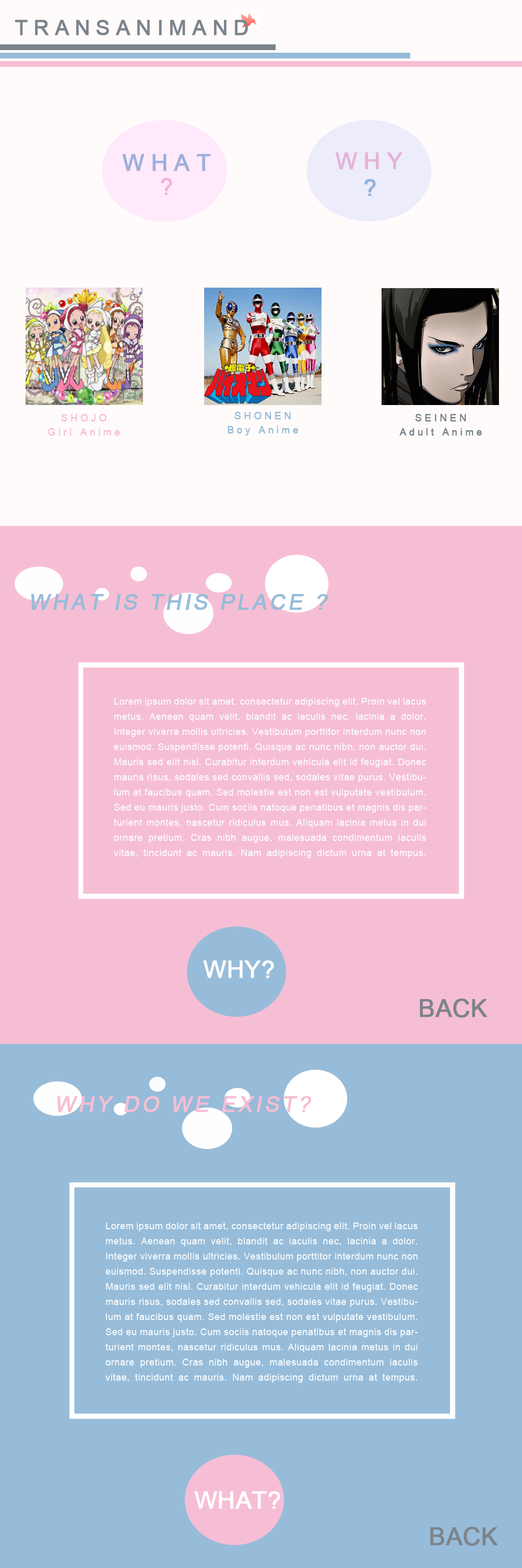
<style>
.page{position:relative;width:522px;height:1568px;background:#97bcd9}
.page>*{position:absolute;margin:0}
.t1{font:9.9px/14.4px "ArialMT";letter-spacing:0.264em;color:#f6bed4;font-weight:bold}
.t2{font:9.9px/14.4px "ArialMT";letter-spacing:0.264em;color:#97bcd9;font-weight:bold}
.t3{font:9.9px/14.4px "ArialMT";letter-spacing:0.264em;color:#7c848b;font-weight:bold}
.t4{font:9.3px/15.1px "ArialMT";letter-spacing:0.04em;color:#fafdff}
.t5{font:24.5px "ArialMT";color:#7c848b;font-weight:bold}
</style>
<div class="page">
<p class="t1" style="left:48px;top:414px;width:72px;height:22px;text-align:center">SHOJO<br>Girl Anime</p>
<p class="t2" style="left:228px;top:412px;width:70px;height:24px;text-align:center">SHONEN<br>Boy Anime</p>
<p class="t3" style="left:399px;top:414px;width:83px;height:22px;text-align:center">SEINEN<br>Adult Anime</p>
<p class="t4" style="left:114px;top:698px;width:312px;height:160px;text-align:justify">Lorem ipsum dolor sit amet, consectetur adipiscing elit. Proin vel lacus metus. Aenean quam velit, blandit ac iaculis nec, lacinia a dolor. Integer viverra mollis ultricies. Vestibulum porttitor interdum nunc non euismod. Suspendisse potenti. Quisque ac nunc nibh, non auctor dui. Mauris sed elit nisl. Curabitur interdum vehicula elit id feugiat. Donec mauris risus, sodales sed convallis sed, sodales vitae purus. Vestibulum at faucibus quam. Sed molestie est non est vulputate vestibulum. Sed eu mauris justo. Cum sociis natoque penatibus et magnis dis parturient montes, nascetur ridiculus mus. Aliquam lacinia metus in dui ornare pretium. Cras nibh augue, malesuada condimentum iaculis vitae, tincidunt ac mauris. Nam adipiscing dictum urna at tempus.</p>
<p class="t5" style="left:420px;top:999px;width:68px;height:19px">BACK</p>
<p class="t4" style="left:105px;top:1222px;width:313px;height:161px;text-align:justify">Lorem ipsum dolor sit amet, consectetur adipiscing elit. Proin vel lacus metus. Aenean quam velit, blandit ac iaculis nec, lacinia a dolor. Integer viverra mollis ultricies. Vestibulum porttitor interdum nunc non euismod. Suspendisse potenti. Quisque ac nunc nibh, non auctor dui. Mauris sed elit nisl. Curabitur interdum vehicula elit id feugiat. Donec mauris risus, sodales sed convallis sed, sodales vitae purus. Vestibulum at faucibus quam. Sed molestie est non est vulputate vestibulum. Sed eu mauris justo. Cum sociis natoque penatibus et magnis dis parturient montes, nascetur ridiculus mus. Aliquam lacinia metus in dui ornare pretium. Cras nibh augue, malesuada condimentum iaculis vitae, tincidunt ac mauris. Nam adipiscing dictum urna at tempus.</p>
<p class="t5" style="left:430px;top:1527px;width:68px;height:19px">BACK</p>
</div>
